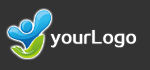
<style>
.page{position:relative;width:150px;height:70px;background:#333333}
.page>*{position:absolute;margin:0}
.t1{font:15.6px "FZZZHONGJW--GB1-0";letter-spacing:0.025em;color:#ffffff}
</style>
<div class="page">
<p class="t1" style="left:50px;top:30px;width:86px;height:18px">yourLogo</p>
</div>
